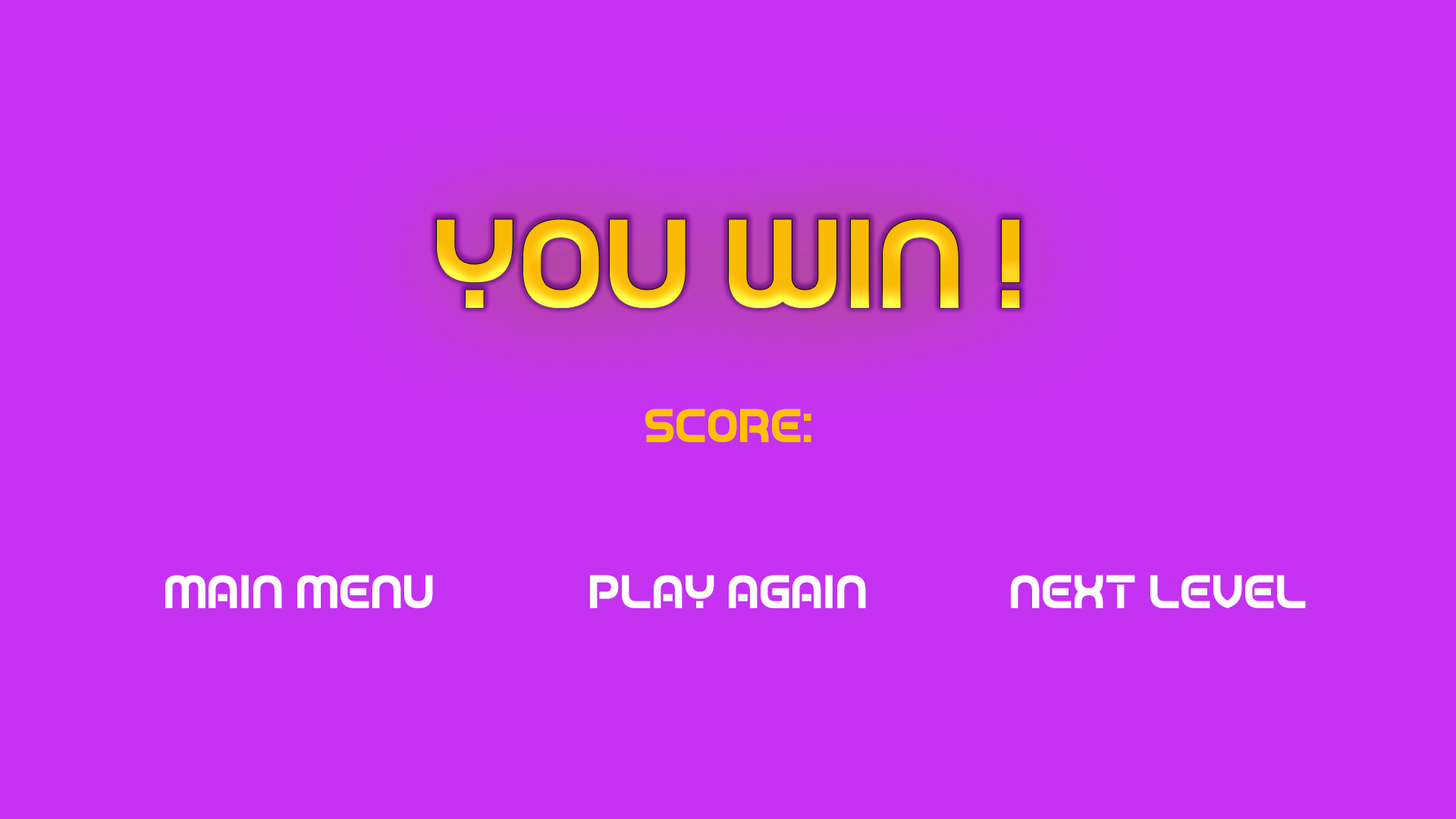
<style>
.page{position:relative;width:1456px;height:819px;background:#c532f2}
.page>*{position:absolute;margin:0}
.t1{font:131.3px "GamePlayed";color:#ffc000}
.t2{font:48.1px "GamePlayed";color:#ffc000}
.t3{font:48.1px "GamePlayed";color:#ffffff}
</style>
<div class="page">
<p class="t1" style="left:436px;top:218px;width:585px;height:91px">! you win</p>
<p class="t2" style="left:645px;top:409px;width:166px;height:33px">:Score</p>
<p class="t3" style="left:165px;top:575px;width:268px;height:33px">Main menu</p>
<p class="t3" style="left:590px;top:575px;width:276px;height:33px">play again</p>
<p class="t3" style="left:1011px;top:575px;width:295px;height:33px">Next level</p>
</div>
